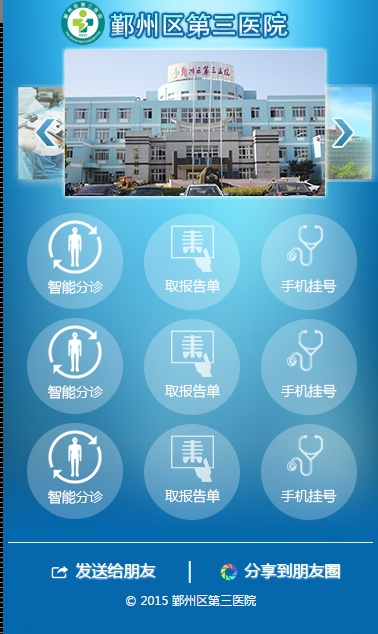
<style>
.page{position:relative;width:378px;height:634px}
.page>*{position:absolute;margin:0}
.t1{font:26px "AdobeHeitiStd-Regular";letter-spacing:-0.02em}
.t2{font:14px "MicrosoftYaHei";letter-spacing:-0.02em;color:#ffffff}
</style>
<div class="page">
<p class="t1" style="left:111px;top:12px;width:177px;height:26px">鄞州区第三医院</p>
<p class="t2" style="left:48px;top:280px;width:55px;height:14px">智能分诊</p>
<p class="t2" style="left:165px;top:279px;width:55px;height:14px">取报告单</p>
<p class="t2" style="left:281px;top:279px;width:56px;height:14px">手机挂号</p>
<p class="t2" style="left:48px;top:385px;width:55px;height:14px">智能分诊</p>
<p class="t2" style="left:165px;top:384px;width:55px;height:14px">取报告单</p>
<p class="t2" style="left:281px;top:384px;width:56px;height:14px">手机挂号</p>
<p class="t2" style="left:48px;top:490px;width:55px;height:14px">智能分诊</p>
<p class="t2" style="left:165px;top:489px;width:55px;height:14px">取报告单</p>
<p class="t2" style="left:281px;top:489px;width:56px;height:14px">手机挂号</p>
</div>
